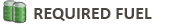
<style>
.page{position:relative;width:193px;height:25px;background:#ffffff}
.page>*{position:absolute;margin:0}
.t1{font:18px "Calibri-Bold";color:#4b4741}
</style>
<div class="page">
<p class="t1" style="left:34px;top:8px;width:118px;height:13px">REQUIRED FUEL</p>
</div>
